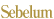
<style>
.page{position:relative;width:54px;height:19px;background:#ffffff}
.page>*{position:absolute;margin:0}
.t1{font:17px "RyuminPro-ExBold";letter-spacing:-0.08em;color:#ae9340;scale:0.9 1}
</style>
<div class="page">
<p class="t1" style="left:1px;top:5px;width:52px;height:13px">Sebelum</p>
</div>
